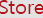
<style>
.page{position:relative;width:43px;height:18px;background:#e2e2e2}
.page>*{position:absolute;margin:0}
.t1{font:20px "MalgunGothicRegular";color:#b5121b}
</style>
<div class="page">
<p class="t1" style="left:0px;top:0px;width:44px;height:14px">Store</p>
</div>
